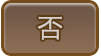
<style>
.page{position:relative;width:101px;height:56px}
.page>*{position:absolute;margin:0}
.t1{font:27px "STHeitiSC-Light";color:#d8d2ce}
</style>
<div class="page">
<p class="t1" style="left:37px;top:16px;width:26px;height:24px">否</p>
</div>
